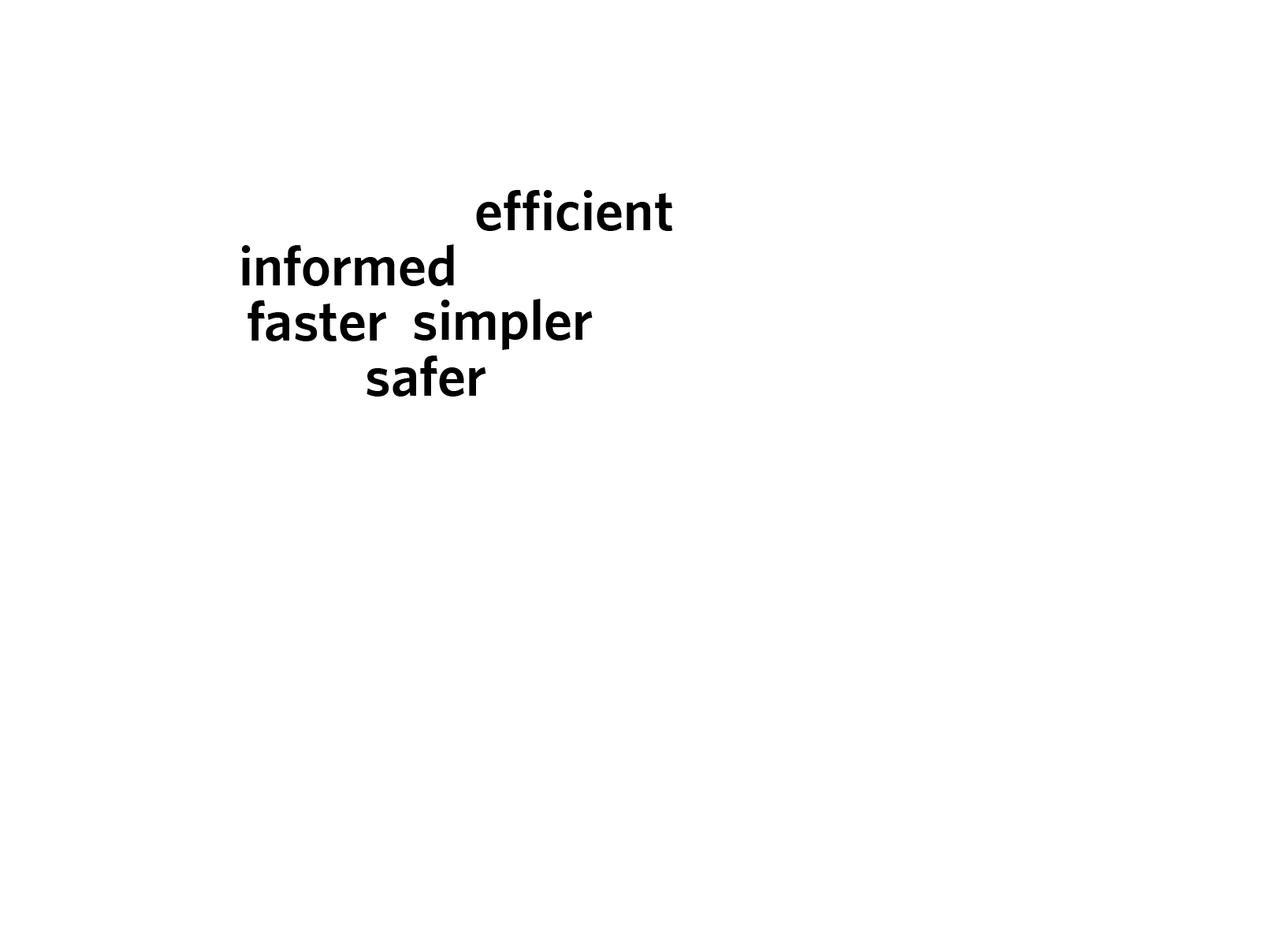
<style>
.page{position:relative;width:1261px;height:946px;background:#ffffff}
.page>*{position:absolute;margin:0}
.t1{font:56.7px "Whitney-Semibold";color:#000000}
</style>
<div class="page">
<p class="t1" style="left:476px;top:190px;width:197px;height:41px">efficient</p>
<p class="t1" style="left:241px;top:244px;width:213px;height:42px">informed</p>
<p class="t1" style="left:247px;top:300px;width:140px;height:41px">faster</p>
<p class="t1" style="left:414px;top:299px;width:179px;height:51px">simpler</p>
<p class="t1" style="left:366px;top:355px;width:120px;height:41px">safer</p>
</div>
